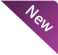
<style>
.page{position:relative;width:58px;height:55px;background:#ffffff}
.page>*{position:absolute;margin:0}
.t1{font:17px "Calibri";color:#ffffff}
</style>
<div class="page">
<p class="t1" style="left:25px;top:5px;width:28px;height:27px;rotate:42deg">New</p>
</div>
